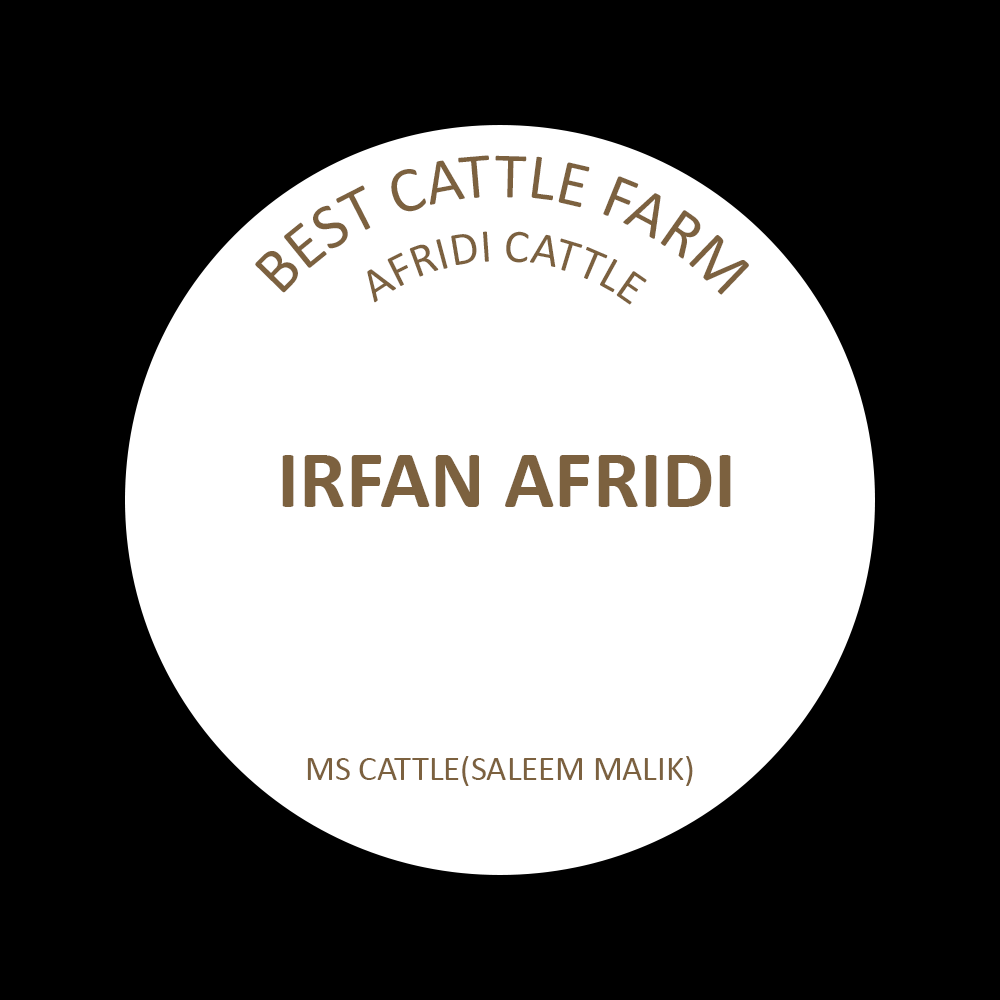
<style>
.page{position:relative;width:1000px;height:1000px;background:#000000}
.page>*{position:absolute;margin:0}
.t1{font:65.2px/11.9px "Calibri";color:#7c613f}
.t2{font:47.4px "Calibri";color:#7c613f}
.t3{font:83.3px "Calibri-Bold";color:#7c613f}
.t4{font:34.7px "Calibri";color:#7c613f}
</style>
<div class="page">
<p class="t1" style="left:255px;top:155px;width:494px;height:140px;rotate:-4deg">BEST CATTLE FARM<br>sas</p>
<p class="t2" style="left:367px;top:231px;width:280px;height:74px;rotate:9deg">AFRIDI CATTLE</p>
<p class="t3" style="left:282px;top:455px;width:449px;height:52px">IRFAN AFRIDI</p>
<p class="t4" style="left:307px;top:756px;width:386px;height:30px">MS CATTLE(SALEEM MALIK)</p>
</div>
